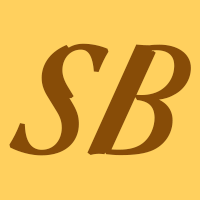
<style>
.page{position:relative;width:200px;height:200px;background:#ffd05e}
.page>*{position:absolute;margin:0}
.t1{font:150px "Britney-Regular";color:#874c07;font-weight:bold}
</style>
<div class="page">
<p class="t1" style="left:9px;top:43px;width:182px;height:113px">SB</p>
</div>
